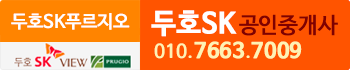
<style>
.page{position:relative;width:350px;height:70px;background:#ff5400}
.page>*{position:absolute;margin:0}
.t1{font:17.8px "NanumBarunGothicOTF";letter-spacing:-0.025em;color:#ffffff;font-weight:bold}
.t2{font:22px "NanumBarunGothicOTF";color:#7f0101;font-weight:bold}
.t3{font:28px "NanumBarunGothicOTFBold";color:#ffffff;font-weight:bold}
.t4{font:20.7px "NanumBarunGothicOTFBold";color:#fef3b4;font-weight:bold}
.t5{font:18.4px "NanumBarunGothicOTF";color:#fef3b4;font-weight:bold}
.t6{font:20.7px "NanumBarunGothicOTFUltraLight";color:#fef3b4;font-weight:bold}
</style>
<div class="page">
<p class="t1" style="left:11px;top:13px;width:119px;height:17px">두호SK푸르지오</p>
<p class="t2" style="left:151px;top:10px;width:187px;height:27px"><span class="t3">두호SK </span>공인중개사</p>
<p class="t4" style="left:154px;top:41px;width:148px;height:18px"><span class="t5">010</span><span class="t6">.</span>7663<span class="t6">.</span>7009</p>
</div>
